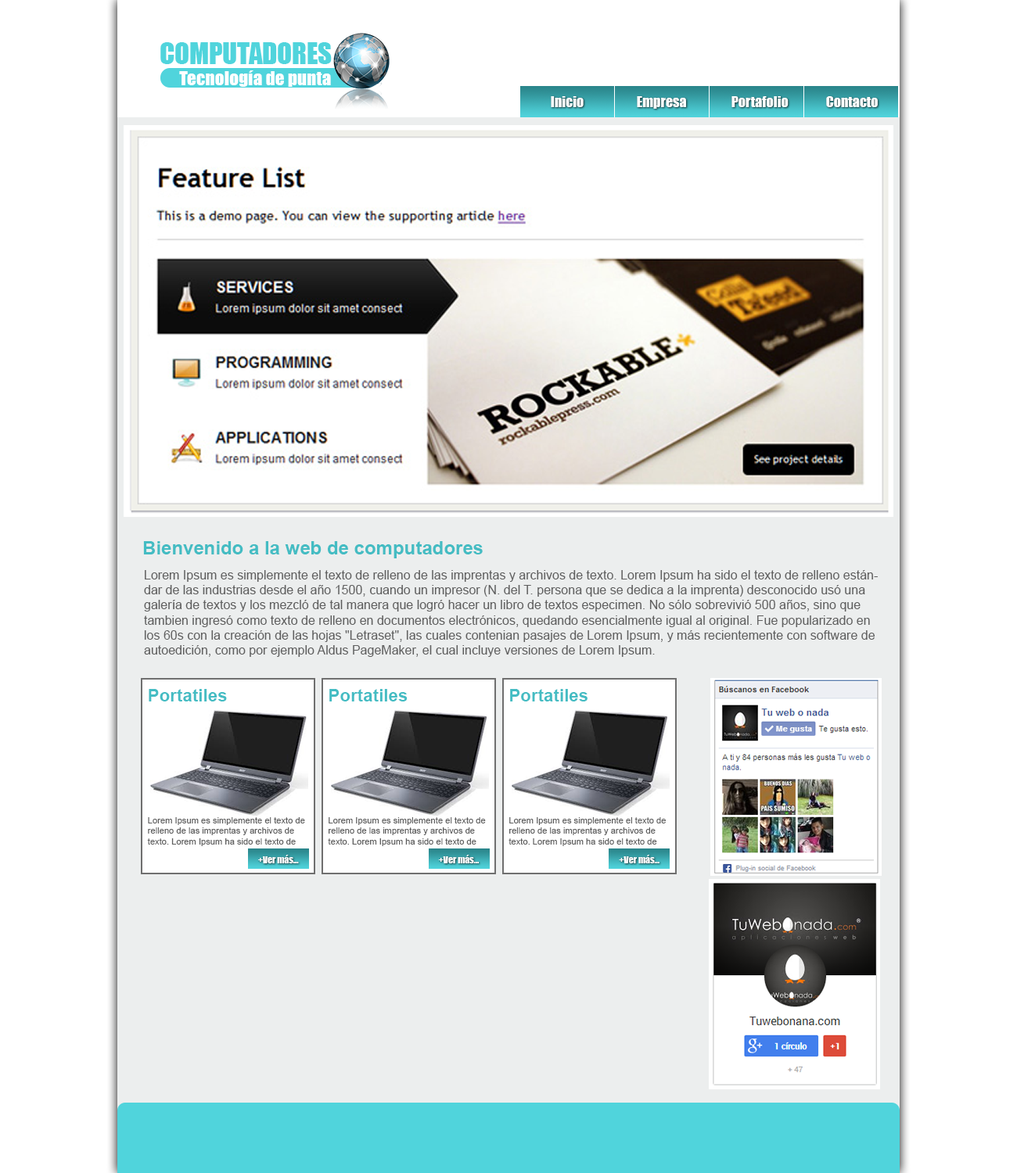
<style>
.page{position:relative;width:1017px;height:1173px;background:#ffffff}
.page>*{position:absolute;margin:0}
.t1{font:14.1px "Impact";color:#ffffff}
.t2{font:18.8px "Arial-BoldMT";color:#44bcc3}
.t3{font:12.5px "ArialMT";color:#5f5f5f}
.t4{font:17.4px "Arial-BoldMT";color:#44bcc3}
.t5{font:8.7px "ArialMT";color:#5f5f5f}
.t6{font:9.2px "Impact";color:#ffffff}
</style>
<div class="page">
<p class="t1" style="left:551px;top:96px;width:32px;height:11px">Inicio</p>
<p class="t1" style="left:637px;top:96px;width:49px;height:13px">Empresa</p>
<p class="t1" style="left:731px;top:96px;width:57px;height:11px">Portafolio</p>
<p class="t1" style="left:826px;top:96px;width:51px;height:11px">Contacto</p>
<p class="t2" style="left:143px;top:541px;width:339px;height:17px">Bienvenido a la web de computadores</p>
<p class="t3" style="left:144px;top:570px;width:733px;height:87px">Lorem Ipsum es simplemente el texto de relleno de las imprentas y archivos de texto. Lorem Ipsum ha sido el texto de relleno estándar de las industrias desde el año 1500, cuando un impresor (N. del T. persona que se dedica a la imprenta) desconocido usó una galería de textos y los mezcló de tal manera que logró hacer un libro de textos especimen. No sólo sobrevivió 500 años, sino que tambien ingresó como texto de relleno en documentos electrónicos, quedando esencialmente igual al original. Fue popularizado en los 60s con la creación de las hojas "Letraset", las cuales contenian pasajes de Lorem Ipsum, y más recientemente con software de autoedición, como por ejemplo Aldus PageMaker, el cual incluye versiones de Lorem Ipsum.</p>
<p class="t4" style="left:149px;top:689px;width:78px;height:12px">Portatiles</p>
<p class="t4" style="left:329px;top:689px;width:78px;height:12px">Portatiles</p>
<p class="t4" style="left:510px;top:689px;width:77px;height:12px">Portatiles</p>
<p class="t5" style="left:147px;top:817px;width:158px;height:29px">Lorem Ipsum es simplemente el texto de relleno de las imprentas y archivos de texto. Lorem Ipsum ha sido el texto de</p>
<p class="t5" style="left:328px;top:817px;width:158px;height:29px">Lorem Ipsum es simplemente el texto de relleno de las imprentas y archivos de texto. Lorem Ipsum ha sido el texto de</p>
<p class="t5" style="left:508px;top:817px;width:157px;height:29px">Lorem Ipsum es simplemente el texto de relleno de las imprentas y archivos de texto. Lorem Ipsum ha sido el texto de</p>
<p class="t6" style="left:258px;top:855px;width:41px;height:8px">+Ver más...</p>
<p class="t6" style="left:438px;top:855px;width:41px;height:8px">+Ver más...</p>
<p class="t6" style="left:619px;top:855px;width:40px;height:8px">+Ver más...</p>
</div>
